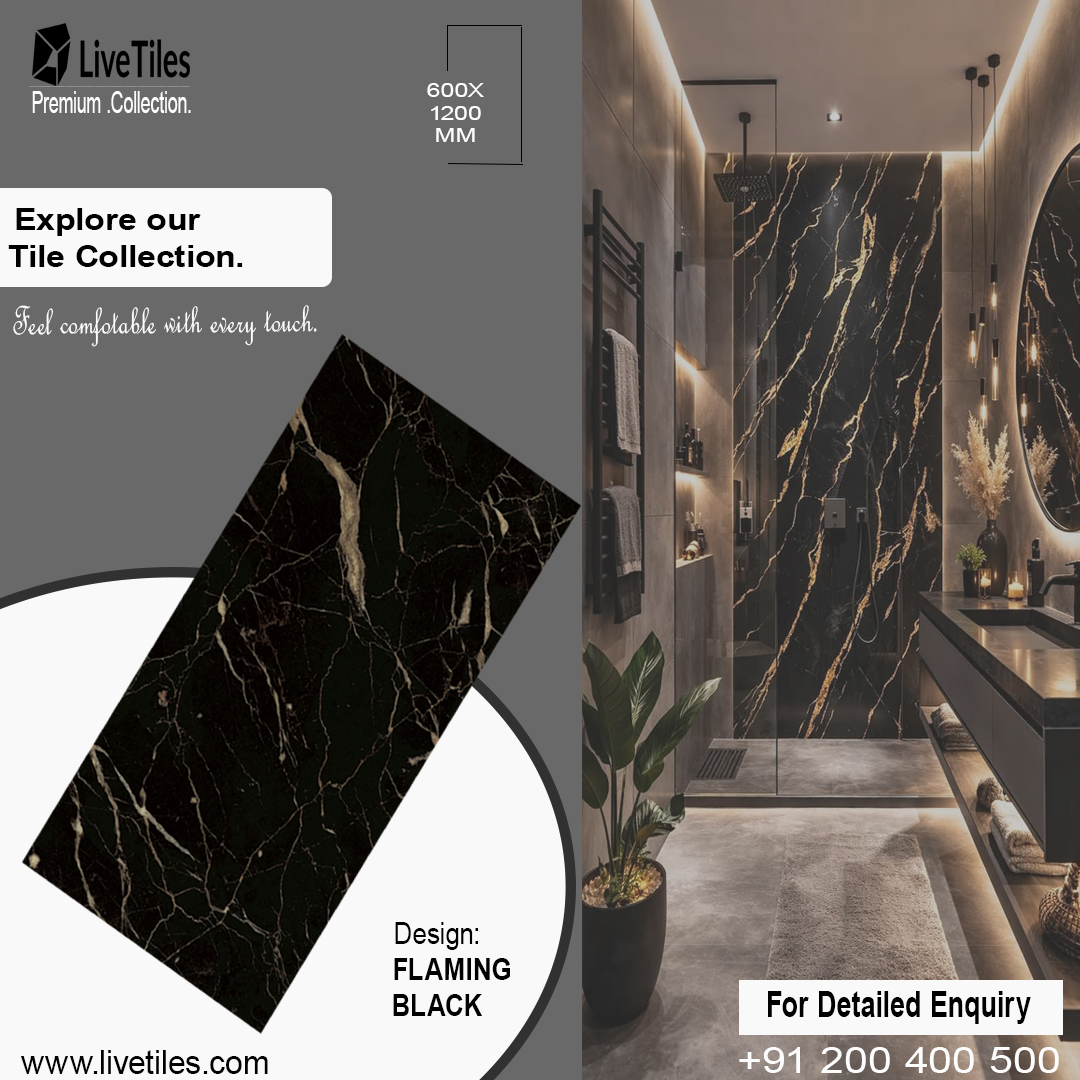
<style>
.page{position:relative;width:1080px;height:1080px;background:#696969}
.page>*{position:absolute;margin:0}
.t1{font:18.8px "ArialMT";letter-spacing:0.01em;color:#fffdfd;scale:1.32 1}
.t2{font:30.5px "ArialMT";letter-spacing:0.01em;color:#fefefe;scale:0.58 1}
.t3{font:30.9px "Arial-BoldMT";letter-spacing:0.01em;color:#000000;scale:1.08 1}
.t4{font:44.3px "FrenchScriptMT";letter-spacing:0.01em;color:#fffdfd;scale:0.73 1}
.t5{font:30px "Arial-BoldMT";letter-spacing:0.01em;color:#010101;scale:0.88 1}
.t6{font:30px "ArialMT";letter-spacing:0.01em;color:#010101;scale:0.88 1}
.t7{font:36.4px "Arial-BoldMT";letter-spacing:0.01em;color:#000000;scale:0.75 1}
.t8{font:36.4px "ArialMT";letter-spacing:0.01em;color:#fcfcfc;scale:1.18 1}
.t9{font:33.1px "ArialMT";letter-spacing:0.01em;color:#000000}
</style>
<div class="page">
<p class="t1" style="left:427px;top:83px;width:57px;height:59px;text-align:center">600X<br>1200<br>MM</p>
<p class="t2" style="left:32px;top:91px;width:159px;height:22px">Premium .Collection.</p>
<p class="t3" style="left:8px;top:208px;width:235px;height:59px;text-align:center">Explore our<br>    Tile Collection.</p>
<p class="t4" style="left:13px;top:305px;width:304px;height:42px;rotate:-1deg">Feel comfotable with every touch.</p>
<p class="t5" style="left:393px;top:922px;width:117px;height:94px;text-align:center"><span class="t6">Design:<br>    </span>FLAMING<br>BLACK</p>
<p class="t7" style="left:768px;top:991px;width:263px;height:33px">For Detailed Enquiry</p>
<p class="t8" style="left:739px;top:1047px;width:320px;height:26px">+91 200 400 500</p>
<p class="t9" style="left:21px;top:1050px;width:247px;height:24px">www.livetiles.com</p>
</div>
